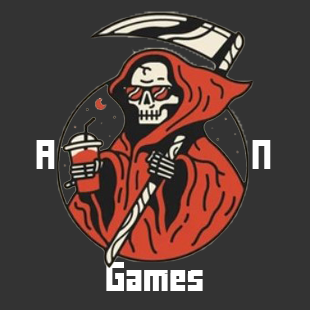
<style>
.page{position:relative;width:310px;height:310px;background:#333333}
.page>*{position:absolute;margin:0}
.t1{font:23.3px "FFFForward";color:#ffffff}
</style>
<div class="page">
<p class="t1" style="left:36px;top:140px;width:19px;height:29px">A</p>
<p class="t1" style="left:252px;top:140px;width:19px;height:29px">N</p>
<p class="t1" style="left:106px;top:262px;width:97px;height:29px">Games</p>
</div>
